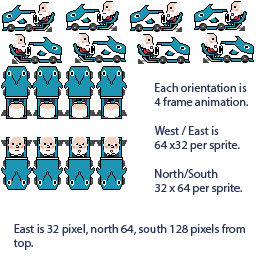
<style>
.page{position:relative;width:256px;height:256px;background:#ffffff}
.page>*{position:absolute;margin:0}
.t1{font:12px "MyriadPro-Regular";color:#2c3959}
</style>
<div class="page">
<p class="t1" style="left:154px;top:83px;width:94px;height:112px">Each orientation is<br>4 frame animation.<br><br>West / East is<br>64 x32 per sprite.<br><br>North/South<br>32 x 64 per sprite.</p>
<p class="t1" style="left:13px;top:224px;width:232px;height:26px">East is 32 pixel, north 64, south 128 pixels from<br>top.</p>
</div>
